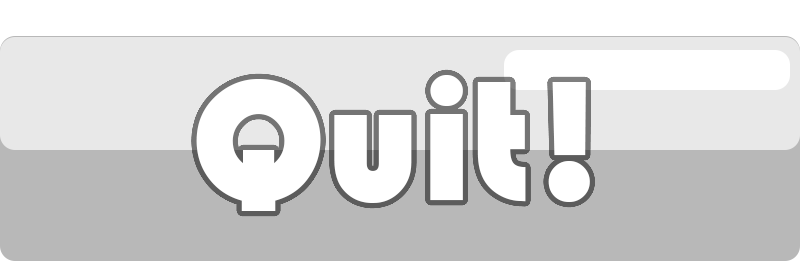
<style>
.page{position:relative;width:800px;height:261px;background:#b8b8b8}
.page>*{position:absolute;margin:0}
.t1{font:177px "Bauhaus93";color:#ffffff}
</style>
<div class="page">
<p class="t1" style="left:196px;top:75px;width:394px;height:136px">Quit!</p>
</div>
